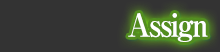
<style>
.page{position:relative;width:220px;height:52px;background:#333333}
.page>*{position:absolute;margin:0}
.t1{font:32px "RyuminPro-ExBold";letter-spacing:-0.08em;color:#ffffff;scale:0.9 1}
</style>
<div class="page">
<p class="t1" style="left:128px;top:13px;width:80px;height:29px">Assign</p>
</div>
